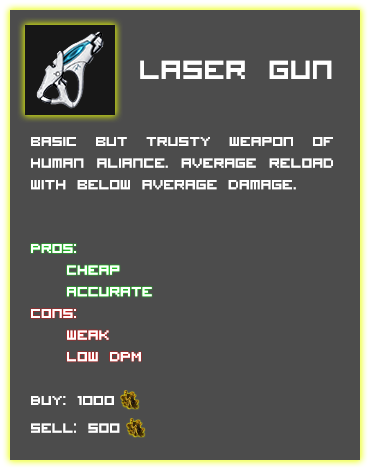
<style>
.page{position:relative;width:370px;height:470px;background:#4c4c4c}
.page>*{position:absolute;margin:0}
.t1{font:36px "VisitorTT1BRK";color:#ffffff}
.t2{font:36px "Arial-BoldMT";color:#ffffff}
.t3{font:18px "VisitorTT1BRK";color:#ffffff}
</style>
<div class="page">
<p class="t1" style="left:140px;top:60px;width:192px;height:19px"><span class="t2"><br></span>Laser Gun</p>
<p class="t3" style="left:31px;top:137px;width:302px;height:53px;text-align:justify">basic but Trusty weapon of human aliance. Average reload with below average damage.</p>
<p class="t3" style="left:31px;top:244px;width:121px;height:53px;text-align:justify">Pros:<br> cheap<br> accurate</p>
<p class="t3" style="left:31px;top:309px;width:110px;height:53px;text-align:justify">Cons:<br> weak<br> Low DPM</p>
<p class="t3" style="left:31px;top:396px;width:89px;height:37px">Buy: 1000 <br><br>Sell: 500</p>
</div>
